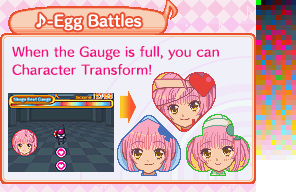
<style>
.page{position:relative;width:296px;height:192px;background:#f0f0f8}
.page>*{position:absolute;margin:0}
.t1{font:14px "HummingStd-B";letter-spacing:0.02em;color:#ffffff}
.t2{font:12px/18px "HummingStd-D";letter-spacing:0.02em;color:#f01080}
</style>
<div class="page">
<p class="t1" style="left:36px;top:13px;width:106px;height:18px">♪-Egg Battles</p>
<p class="t2" style="left:12px;top:46px;width:207px;height:29px">When the Gauge is full, you can<br>Character Transform!</p>
</div>
